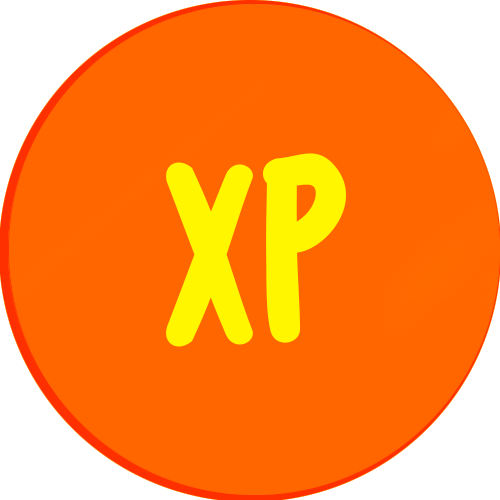
<style>
.page{position:relative;width:500px;height:500px;background:#ff6600}
.page>*{position:absolute;margin:0}
.t1{font:250px "DKGrumpyTiger-Regular";color:#fff600}
</style>
<div class="page">
<p class="t1" style="left:166px;top:153px;width:180px;height:194px">XP</p>
</div>
